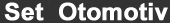
<style>
.page{position:relative;width:170px;height:23px;background:#333333}
.page>*{position:absolute;margin:0}
.t1{font:24px "Arial-BoldMT";color:#ffffff;font-weight:bold}
</style>
<div class="page">
<p class="t1" style="left:4px;top:2px;width:164px;height:19px">Set  Otomotiv</p>
</div>
